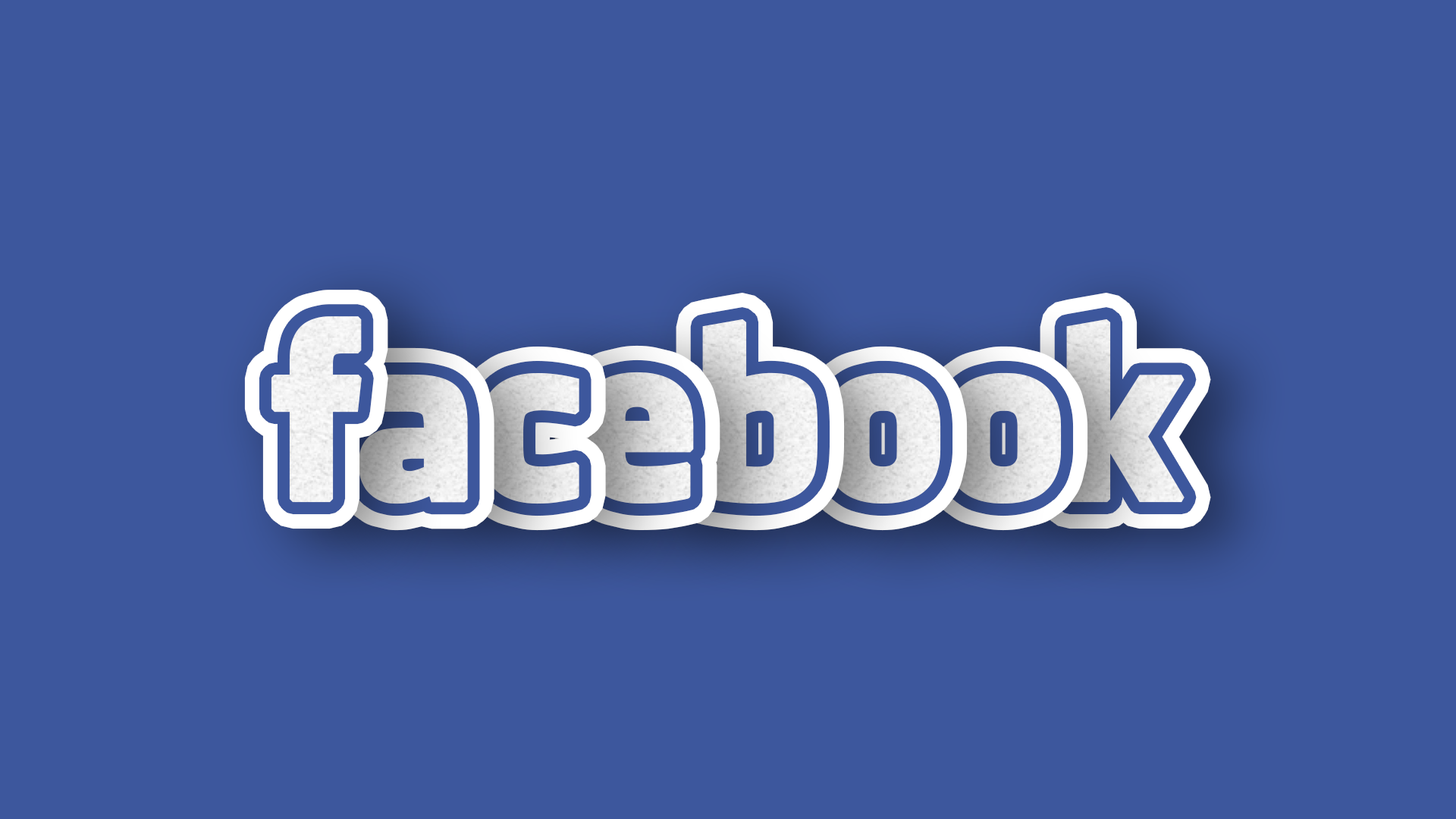
<style>
.page{position:relative;width:1456px;height:819px;background:#3d579d}
.page>*{position:absolute;margin:0}
.t1{font:227.5px "FacebookLetterFaces";letter-spacing:0.025em;color:#ffffff;font-weight:bold}
.t2{font:227.5px "FacebookLetterFaces";letter-spacing:0.025em;font-weight:bold}
</style>
<div class="page">
<p class="t1" style="left:271px;top:316px;width:91px;height:187px">f</p>
<p class="t2" style="left:702px;top:319px;width:116px;height:185px">b</p>
<p class="t2" style="left:1066px;top:319px;width:119px;height:184px">k</p>
<p class="t2" style="left:358px;top:374px;width:110px;height:130px">a</p>
<p class="t2" style="left:479px;top:373px;width:100px;height:131px">c</p>
<p class="t2" style="left:581px;top:372px;width:113px;height:132px">e</p>
<p class="t2" style="left:826px;top:372px;width:115px;height:132px">o</p>
<p class="t2" style="left:946px;top:372px;width:116px;height:132px">o</p>
</div>
